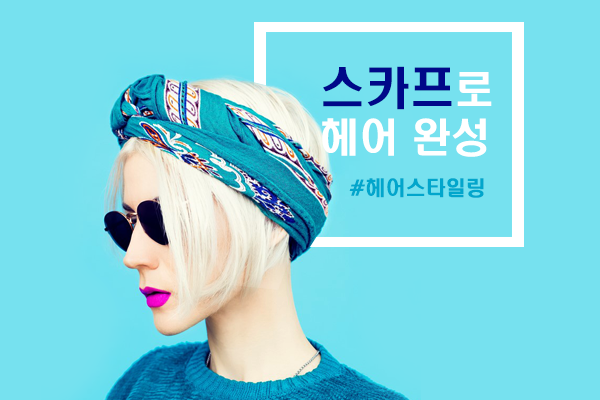
<style>
.page{position:relative;width:600px;height:400px;background:#76e1ef}
.page>*{position:absolute;margin:0}
.t1{font:39.4px "H2hdrM";color:#ffffff}
.t2{font:45px "H2hdrM";color:#000889}
.t3{font:20px "H2hdrM";color:#01a6cc}
</style>
<div class="page">
<p class="t1" style="left:322px;top:66px;width:170px;height:91px"><span class="t2">스카프</span>로<br>헤어 완성</p>
<p class="t3" style="left:349px;top:178px;width:135px;height:20px">#헤어스타일링</p>
</div>
